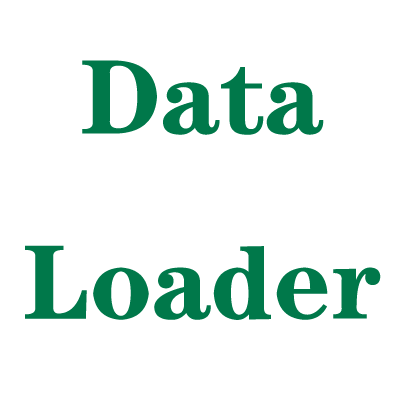
<style>
.page{position:relative;width:400px;height:400px;background:#ffffff}
.page>*{position:absolute;margin:0}
.t1{font:105.8px "FZCHSJW--GB1-0";color:#00784a}
</style>
<div class="page">
<p class="t1" style="left:25px;top:60px;width:356px;height:260px;text-align:center">Data<br>Loader</p>
</div>
